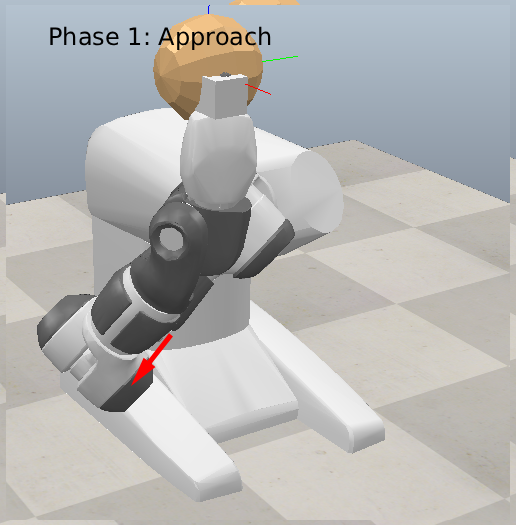
<style>
.page{position:relative;width:516px;height:525px}
.page>*{position:absolute;margin:0}
.t1{font:24px "DejaVuSans";color:#000000}
</style>
<div class="page">
<p class="t1" style="left:50px;top:26px;width:221px;height:24px">Phase 1: Approach</p>
</div>
